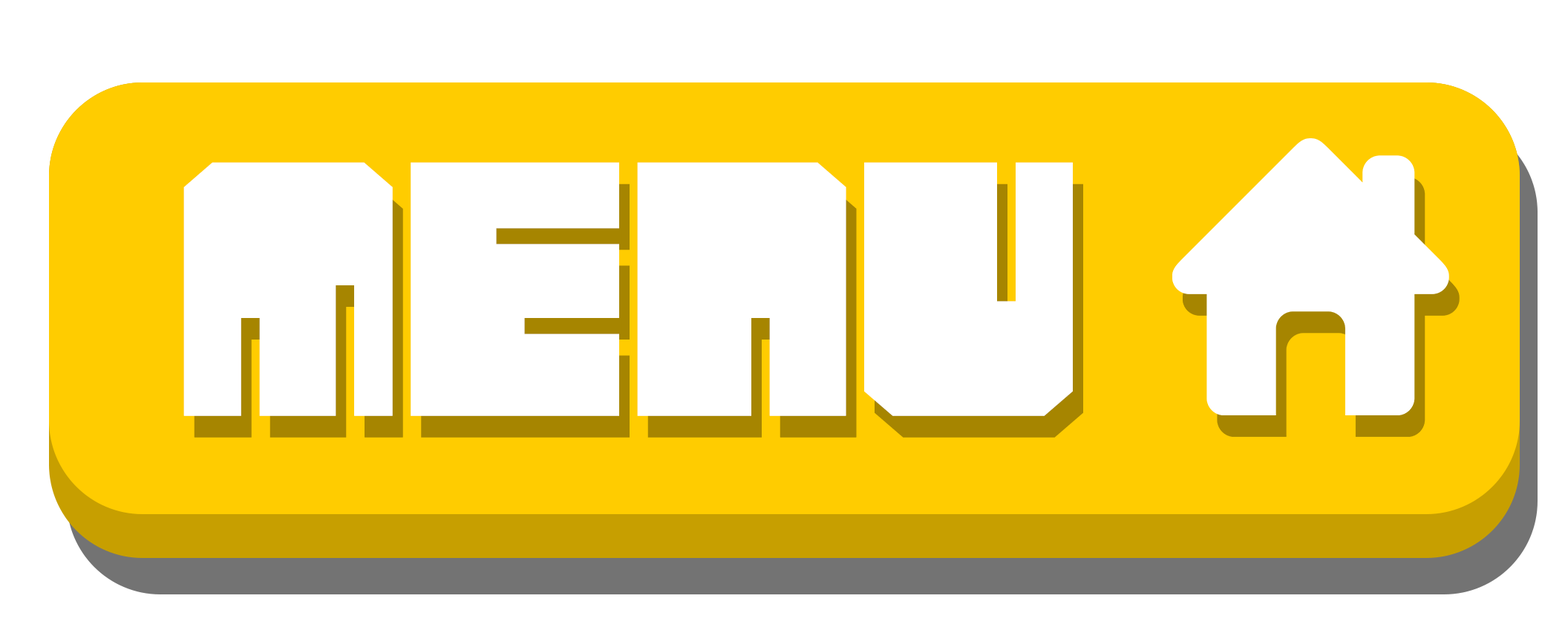
<style>
.page{position:relative;width:1568px;height:636px;background:#ffffff}
.page>*{position:absolute;margin:0}
.t1{font:252.7px "Fruit-Punch";color:#ffffff;font-weight:bold;scale:1.16 1}
</style>
<div class="page">
<p class="t1" style="left:183px;top:162px;width:890px;height:254px">MENU</p>
</div>
